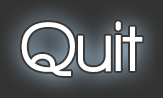
<style>
.page{position:relative;width:163px;height:98px}
.page>*{position:absolute;margin:0}
.t1{font:72px "WalkwayUltraBold";color:#ffffff}
</style>
<div class="page">
<p class="t1" style="left:21px;top:21px;width:122px;height:55px">Quit</p>
</div>
